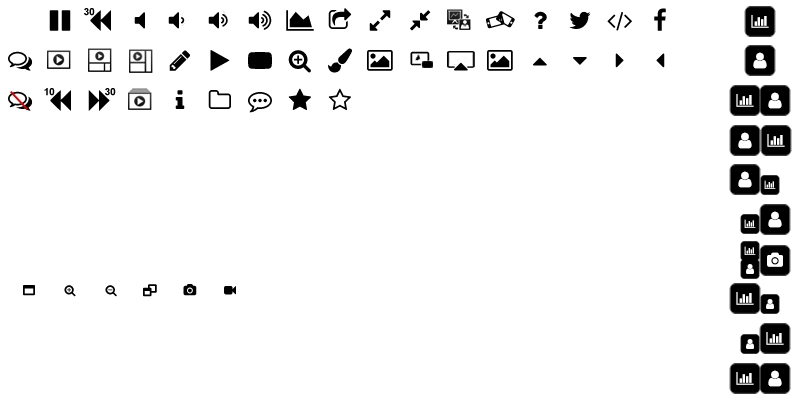
<style>
.page{position:relative;width:800px;height:400px;background:#ffffff}
.page>*{position:absolute;margin:0}
.t1{font:10px "Arial-BoldMT";color:#000000}
</style>
<div class="page">
<p class="t1" style="left:84px;top:8px;width:11px;height:8px">30</p>
<p class="t1" style="left:44px;top:88px;width:11px;height:8px">10</p>
<p class="t1" style="left:105px;top:88px;width:11px;height:8px">30</p>
</div>
